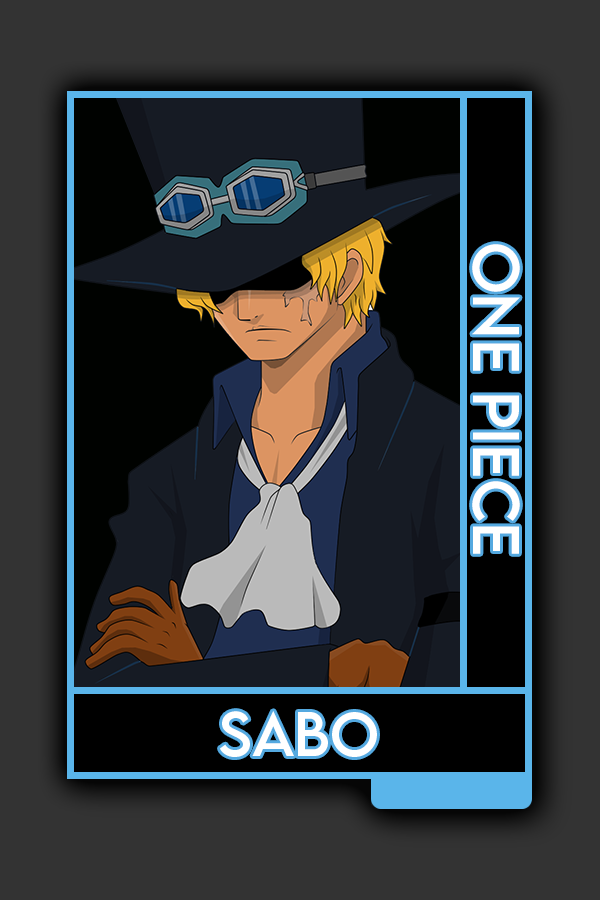
<style>
.page{position:relative;width:600px;height:900px;background:#333333}
.page>*{position:absolute;margin:0}
.t1{font:58.4px "LEMONMILK-Regular";color:#ffffff}
.t2{font:55.4px "LEMONMILK-Regular";color:#ffffff}
</style>
<div class="page">
<p class="t1" style="left:472px;top:244px;width:48px;height:310px;rotate:90deg">One Piece</p>
<p class="t2" style="left:220px;top:711px;width:157px;height:46px">Sabo</p>
</div>
